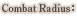
<style>
.page{position:relative;width:77px;height:16px;background:#ffffff}
.page>*{position:absolute;margin:0}
.t1{font:10px "RyuminPro-ExBold";letter-spacing:-0.04em;color:#534738}
</style>
<div class="page">
<p class="t1" style="left:2px;top:4px;width:68px;height:9px">Combat Radius</p>
</div>
